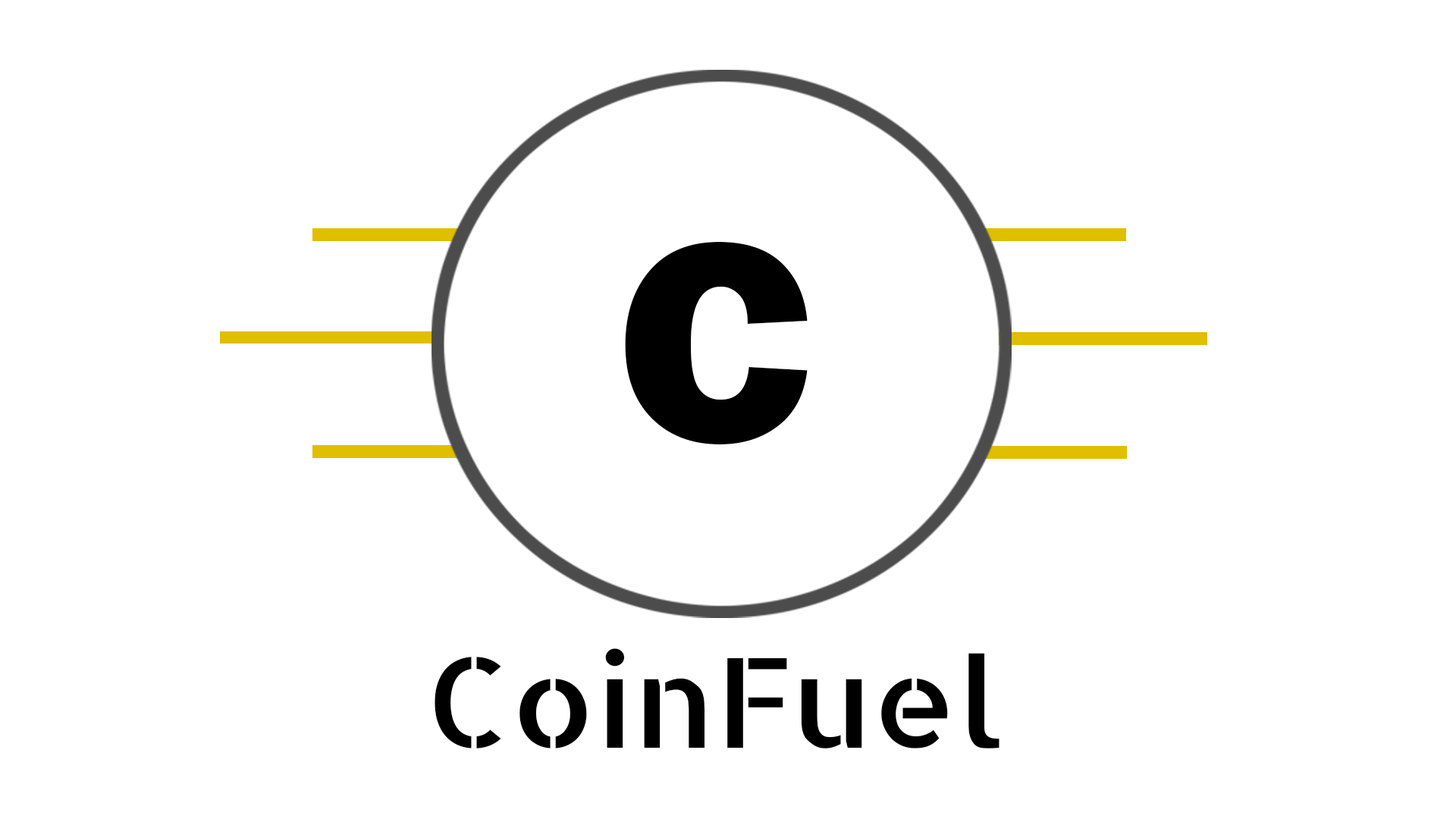
<style>
.page{position:relative;width:1456px;height:819px;background:#ffffff}
.page>*{position:absolute;margin:0}
.t1{font:294.6px "FranklinGothic-Heavy";color:#000000;scale:1.06 1}
.t2{font:124.4px "AllertaStencil-Regular";color:#000000;scale:1.06 1}
</style>
<div class="page">
<p class="t1" style="left:625px;top:242px;width:183px;height:202px">C</p>
<p class="t2" style="left:435px;top:648px;width:564px;height:100px">CoinFuel</p>
</div>
